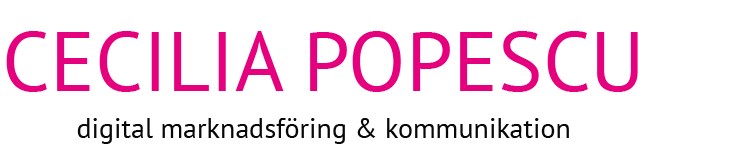
<style>
.page{position:relative;width:747px;height:163px;background:#ffffff}
.page>*{position:absolute;margin:0}
.t1{font:84px "PTSans-Regular";color:#e5007d}
.t2{font:28px "PTSans-Regular";color:#070707}
</style>
<div class="page">
<p class="t1" style="left:6px;top:31px;width:632px;height:61px">CECILIA POPESCU</p>
<p class="t2" style="left:77px;top:118px;width:492px;height:26px">digital marknadsföring &amp; kommunikation</p>
</div>
